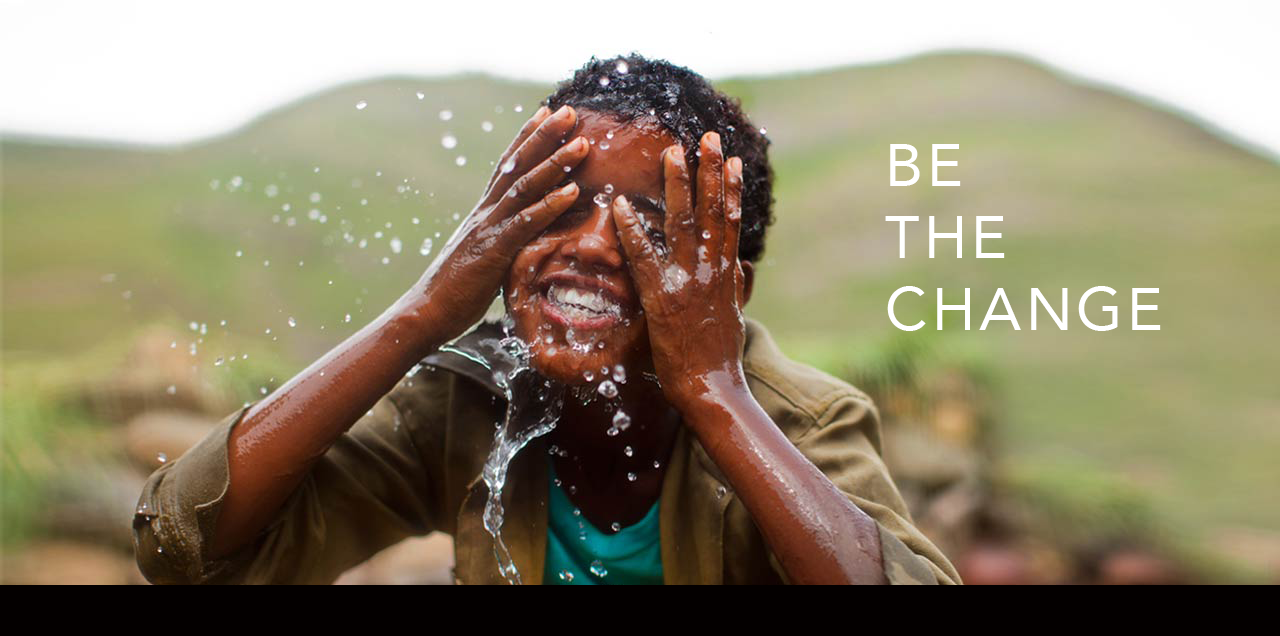
<style>
.page{position:relative;width:1280px;height:636px}
.page>*{position:absolute;margin:0}
.t1{font:60px "Avenir-Roman";letter-spacing:0.069em;color:#ffffff}
</style>
<div class="page">
<p class="t1" style="left:885px;top:144px;width:276px;height:187px">BE<br>THE<br>CHANGE</p>
</div>
